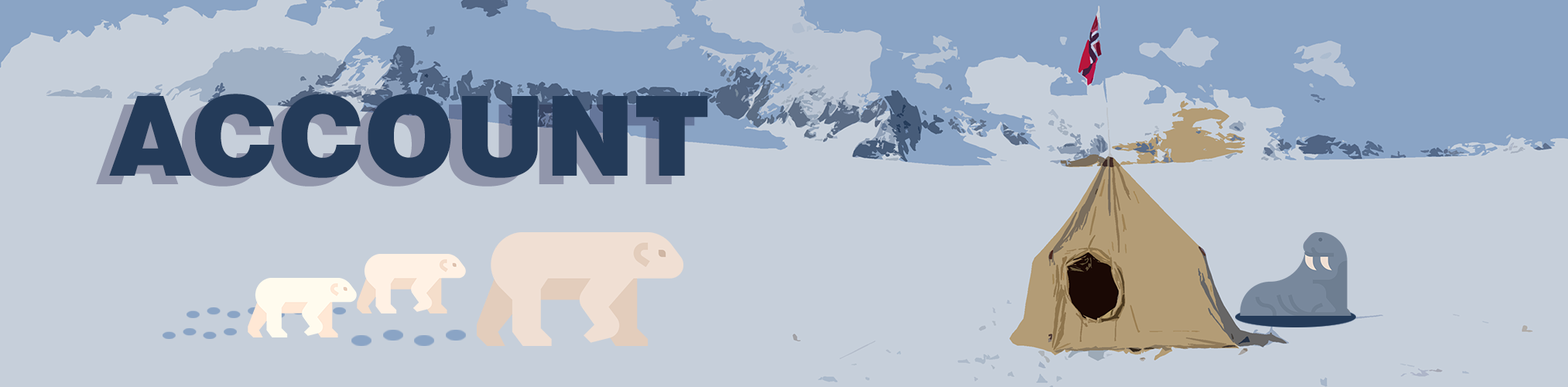
<style>
.page{position:relative;width:1568px;height:387px;background:#c6cfda}
.page>*{position:absolute;margin:0}
.t1{font:110.5px "Swiss721BT-Black";color:#243b59}
</style>
<div class="page">
<p class="t1" style="left:109px;top:94px;width:599px;height:84px">ACCOUNT</p>
</div>
